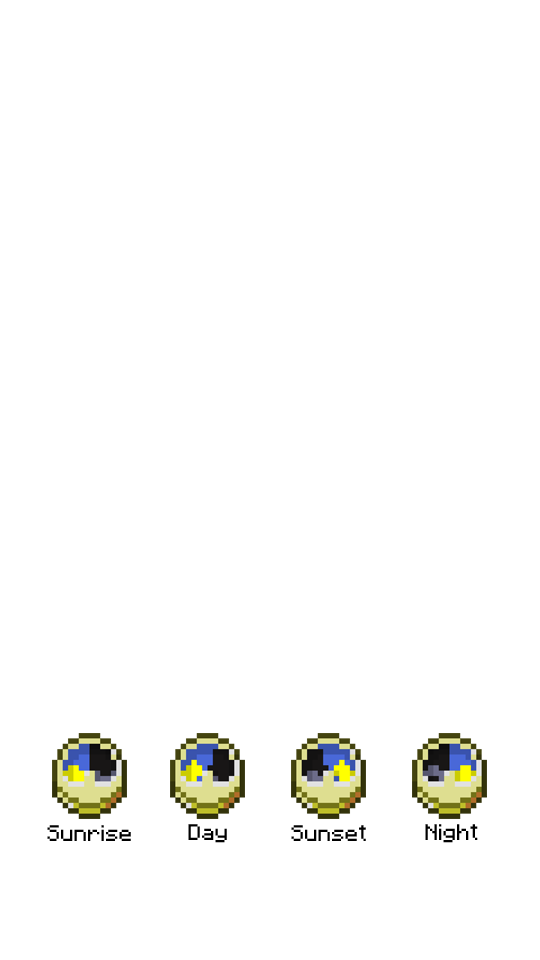
<style>
.page{position:relative;width:540px;height:960px;background:#ffffff}
.page>*{position:absolute;margin:0}
.t1{font:18px "Minecraft";color:#000000}
</style>
<div class="page">
<p class="t1" style="left:47px;top:825px;width:84px;height:16px">Sunrise</p>
<p class="t1" style="left:188px;top:824px;width:39px;height:19px">Day</p>
<p class="t1" style="left:291px;top:825px;width:75px;height:16px">Sunset</p>
<p class="t1" style="left:425px;top:824px;width:53px;height:19px">Night</p>
</div>
